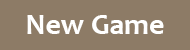
<style>
.page{position:relative;width:190px;height:50px;background:#8d7b66}
.page>*{position:absolute;margin:0}
.t1{font:30px "Candara-Bold";color:#ffffff}
</style>
<div class="page">
<p class="t1" style="left:27px;top:15px;width:137px;height:19px">New Game</p>
</div>
